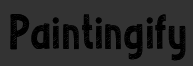
<style>
.page{position:relative;width:193px;height:66px;background:#333333}
.page>*{position:absolute;margin:0}
.t1{font:50px "HolidayVibesFree-Regular";color:#000000}
</style>
<div class="page">
<p class="t1" style="left:10px;top:14px;width:176px;height:47px">Paintingify</p>
</div>
